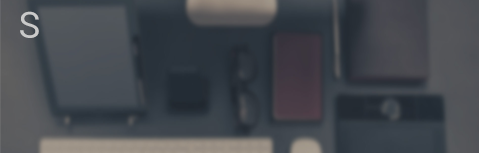
<style>
.page{position:relative;width:479px;height:153px}
.page>*{position:absolute;margin:0}
.t1{font:36px "Roboto-Regular";color:#cacaca}
</style>
<div class="page">
<p class="t1" style="left:20px;top:11px;width:19px;height:27px">S</p>
</div>
